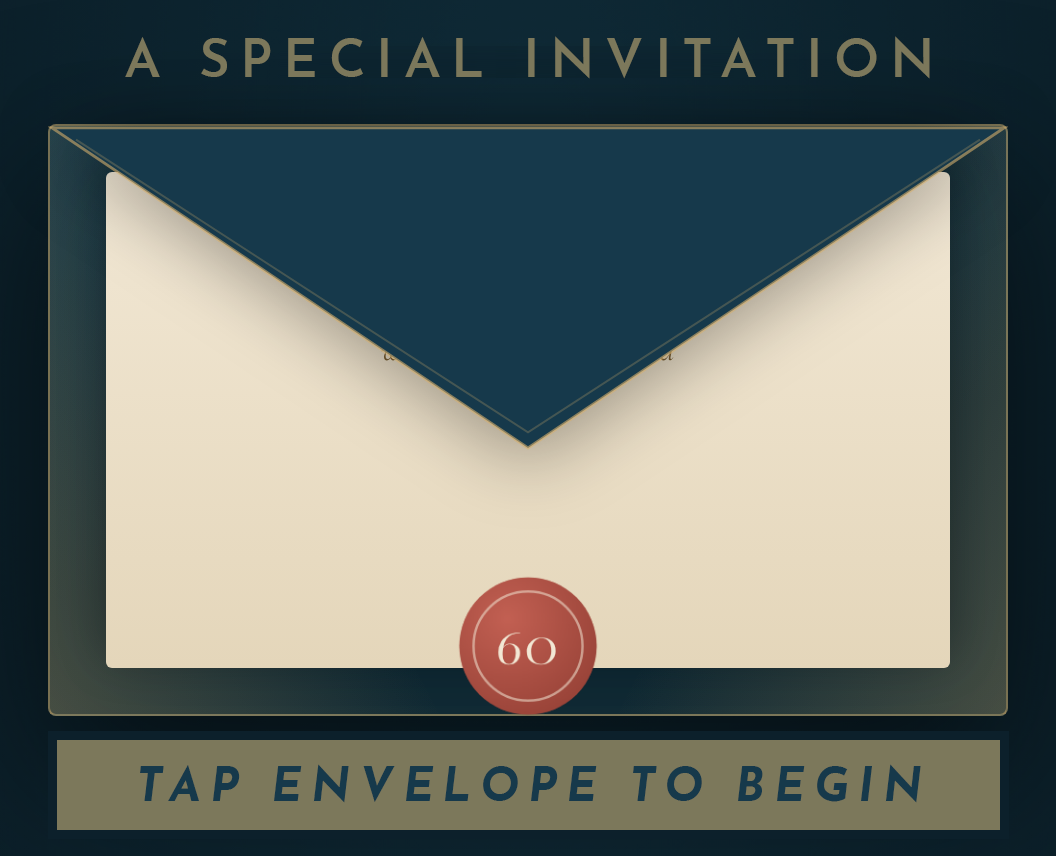
<style>
.page{position:relative;width:1056px;height:856px}
.page>*{position:absolute;margin:0}
.t1{font:53px "JosefinSans-SemiBold";letter-spacing:0.2em;color:#7c785b}
.t2{font:46px "JosefinSans-BoldItalic";letter-spacing:0.2em;color:#16394b}
</style>
<div class="page">
<p class="t1" style="left:125px;top:36px;width:805px;height:43px">A SPECIAL INVITATION</p>
<p class="t2" style="left:140px;top:764px;width:781px;height:39px">TAP ENVELOPE TO BEGIN</p>
</div>
